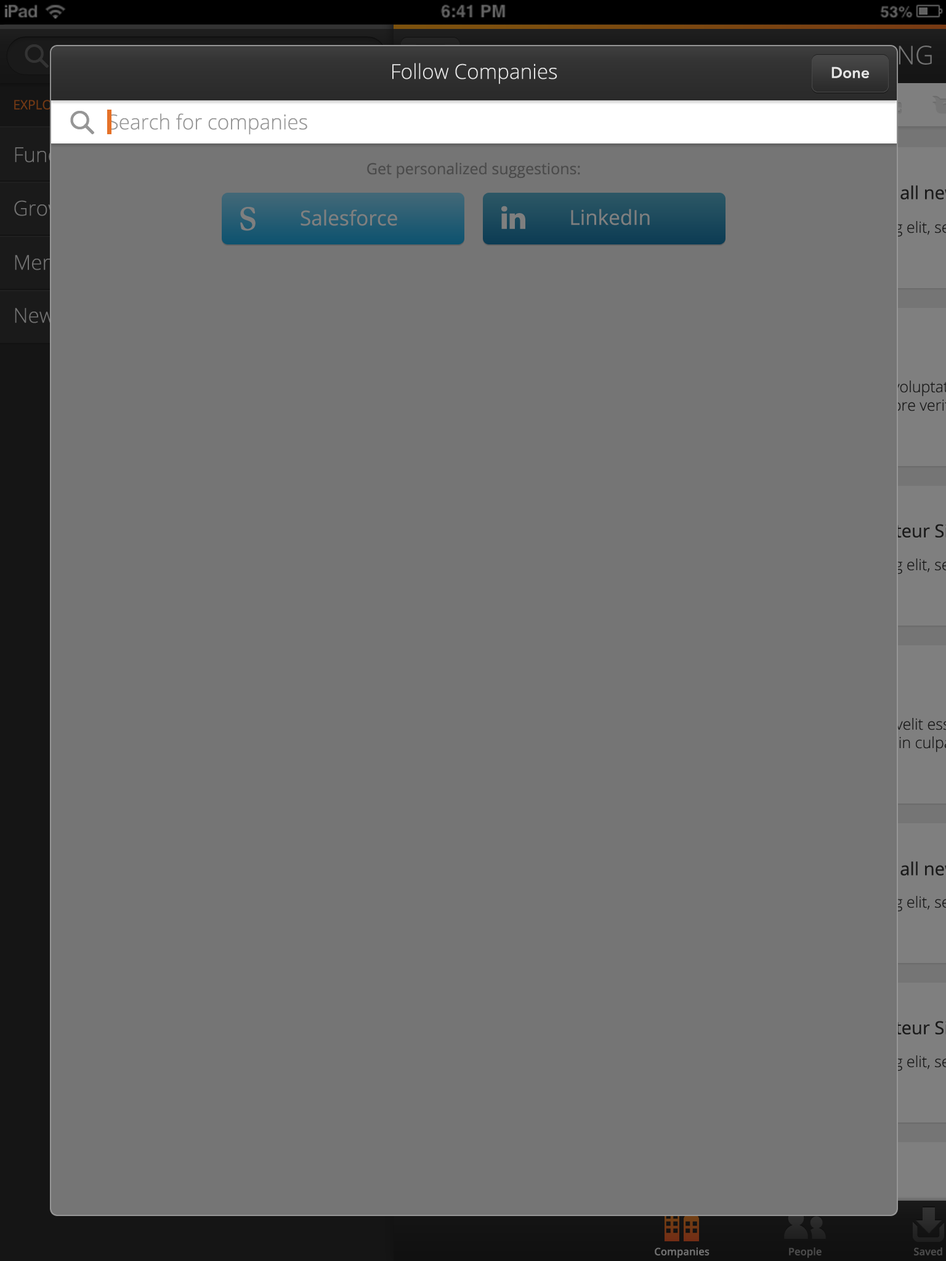
<style>
.page{position:relative;width:946px;height:1261px;background:#757575}
.page>*{position:absolute;margin:0}
.t1{font:20.5px "OpenSans-Light";color:#e5e5e5}
.t2{font:15.4px "AvenirNext-DemiBold";color:#e5e5e5}
.t3{font:20.5px "OpenSans-Light";color:#969696}
.t4{font:15.4px "OpenSans";color:#4b4b4b}
.t5{font:20.5px "OpenSans";color:#7f7f7f}
</style>
<div class="page">
<p class="t1" style="left:392px;top:63px;width:165px;height:21px">Follow Companies</p>
<p class="t2" style="left:831px;top:66px;width:38px;height:12px">Done</p>
<p class="t3" style="left:108px;top:113px;width:199px;height:22px">Search for companies</p>
<p class="t4" style="left:367px;top:163px;width:213px;height:16px">Get personalized suggestions:</p>
<p class="t5" style="left:300px;top:209px;width:97px;height:17px">Salesforce</p>
<p class="t5" style="left:571px;top:209px;width:79px;height:16px">LinkedIn</p>
</div>
